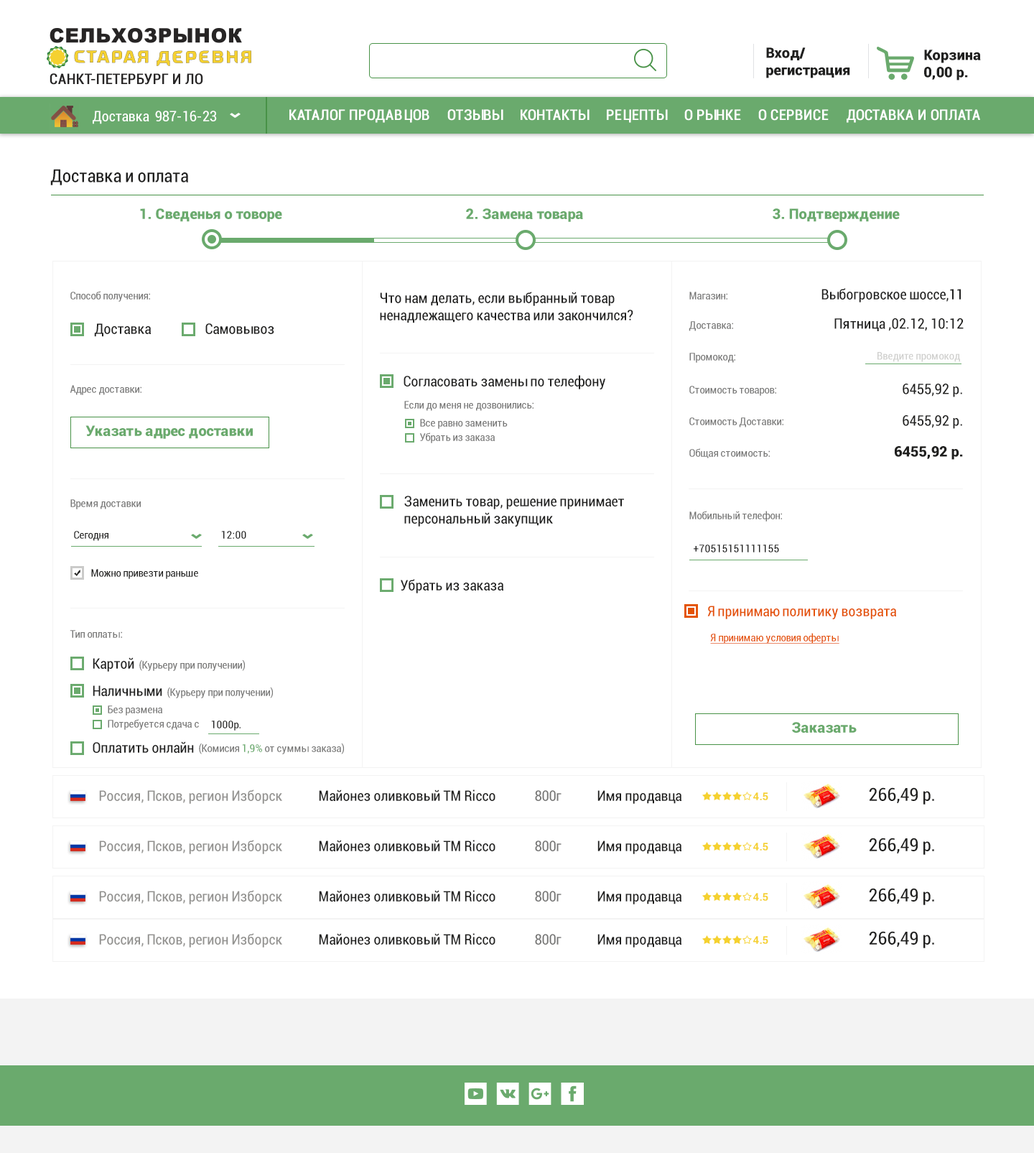
<style>
.page{position:relative;width:1034px;height:1153px;background:#ffffff}
.page>*{position:absolute;margin:0}
.t1{font:14.4px "Roboto-Black";color:#20201f}
.t2{font:14.4px "Roboto-Condensed";color:#272525;text-transform:uppercase;font-weight:bold}
.t3{font:14.4px "Roboto-Condensed";color:#ffffff}
.t4{font:14.4px "Roboto-Condensed";color:#ffffff;text-transform:uppercase;font-weight:bold}
.t5{font:18px "Roboto-Condensed";color:#20201f}
.t6{font:14.4px "Roboto-Black";color:#6aaa6d}
.t7{font:10.8px "Roboto-Condensed";color:#787877}
.t8{font:14.4px "Roboto-Condensed";color:#20201f}
.t9{font:10.8px "Roboto-Condensed";color:#cfcfcd}
.t10{font:10.8px "Roboto-Condensed";color:#20201f}
.t11{font:14.4px "Roboto-Condensed";color:#e45304}
.t12{font:10.8px "Roboto-Condensed";color:#e45304;text-decoration:underline}
.t13{font:10.8px "Roboto-Condensed";color:#6aaa6d}
.t14{font:14.4px "Roboto-Condensed";color:#939290}
.t15{font:14.4px "Roboto-Condensed";color:#787877}
.t16{font:10.8px "Roboto-Bold";color:#f5d130}
</style>
<div class="page">
<p class="t1" style="left:766px;top:47px;width:84px;height:31px">Вход/<br>регистрация</p>
<p class="t1" style="left:924px;top:50px;width:57px;height:30px">Корзина<br>0,00 р.</p>
<p class="t2" style="left:50px;top:73px;width:153px;height:12px">Санкт-Петербург и ЛО</p>
<p class="t3" style="left:93px;top:111px;width:56px;height:13px">Доставка</p>
<p class="t3" style="left:155px;top:111px;width:62px;height:10px">987-16-23</p>
<p class="t4" style="left:289px;top:109px;width:141px;height:14px">Каталог продавцов</p>
<p class="t4" style="left:447px;top:109px;width:57px;height:12px">Отзывы</p>
<p class="t4" style="left:521px;top:109px;width:69px;height:12px">Контакты</p>
<p class="t4" style="left:607px;top:109px;width:61px;height:14px">Рецепты</p>
<p class="t4" style="left:685px;top:109px;width:56px;height:12px">О рынке</p>
<p class="t4" style="left:759px;top:109px;width:70px;height:12px">О Сервисе</p>
<p class="t4" style="left:847px;top:109px;width:133px;height:14px">Доставка и оплата</p>
<p class="t5" style="left:50px;top:169px;width:138px;height:16px">Доставка и оплата</p>
<p class="t6" style="left:140px;top:208px;width:142px;height:14px">1. Сведенья о товоре</p>
<p class="t6" style="left:466px;top:208px;width:117px;height:14px">2. Замена товара</p>
<p class="t6" style="left:773px;top:208px;width:127px;height:14px">3. Подтверждение</p>
<p class="t7" style="left:70px;top:291px;width:80px;height:11px">Способ получения:</p>
<p class="t8" style="left:380px;top:292px;width:254px;height:31px">Что нам делать, если выбранный товар <br>ненадлежащего качества или закончился?</p>
<p class="t7" style="left:690px;top:292px;width:38px;height:8px">Магазин:</p>
<p class="t8" style="left:822px;top:288px;width:139px;height:14px">Выбогровское шоссе,11</p>
<p class="t8" style="left:94px;top:323px;width:57px;height:14px">Доставка</p>
<p class="t8" style="left:205px;top:323px;width:69px;height:11px">Самовывоз</p>
<p class="t7" style="left:689px;top:321px;width:44px;height:10px">Доставка:</p>
<p class="t8" style="left:835px;top:318px;width:129px;height:13px">Пятница ,02.12, 10:12</p>
<p class="t7" style="left:690px;top:353px;width:46px;height:10px">Промокод:</p>
<p class="t9" style="left:878px;top:352px;width:82px;height:10px">Введите промокод</p>
<p class="t8" style="left:404px;top:375px;width:202px;height:14px">Согласовать замены по телефону</p>
<p class="t7" style="left:70px;top:385px;width:72px;height:10px">Адрес доставки:</p>
<p class="t7" style="left:690px;top:386px;width:86px;height:10px">Стоимость товаров:</p>
<p class="t8" style="left:903px;top:384px;width:60px;height:13px">6455,92 р.</p>
<p class="t7" style="left:404px;top:401px;width:130px;height:10px">Если до меня не дозвонились:</p>
<p class="t6" style="left:85px;top:425px;width:168px;height:14px">Указать адрес доставки</p>
<p class="t7" style="left:420px;top:419px;width:88px;height:10px">Все равно заменить</p>
<p class="t7" style="left:690px;top:417px;width:94px;height:10px">Стоимость Доставки:</p>
<p class="t8" style="left:903px;top:415px;width:60px;height:14px">6455,92 р.</p>
<p class="t7" style="left:419px;top:432px;width:76px;height:11px">Убрать из заказа</p>
<p class="t7" style="left:690px;top:448px;width:80px;height:10px">Общая стоимость:</p>
<p class="t1" style="left:895px;top:446px;width:68px;height:14px">6455,92 р.</p>
<p class="t8" style="left:404px;top:496px;width:220px;height:31px">Заменить товар, решение принимает <br>персональный закупщик</p>
<p class="t7" style="left:70px;top:499px;width:71px;height:10px">Время доставки</p>
<p class="t7" style="left:690px;top:511px;width:92px;height:10px">Мобильный телефон:</p>
<p class="t10" style="left:74px;top:531px;width:34px;height:10px">Сегодня</p>
<p class="t10" style="left:221px;top:531px;width:25px;height:8px">12:00</p>
<p class="t10" style="left:694px;top:544px;width:85px;height:8px">+70515151111155</p>
<p class="t10" style="left:91px;top:569px;width:107px;height:10px">Можно привезти раньше</p>
<p class="t8" style="left:401px;top:579px;width:103px;height:14px">Убрать из заказа</p>
<p class="t11" style="left:708px;top:606px;width:188px;height:13px">Я принимаю политику возврата</p>
<p class="t7" style="left:70px;top:630px;width:52px;height:8px">Тип оплаты:</p>
<p class="t12" style="left:710px;top:633px;width:130px;height:11px">Я принимаю условия оферты</p>
<p class="t8" style="left:93px;top:657px;width:41px;height:15px">Картой</p>
<p class="t7" style="left:139px;top:659px;width:106px;height:12px">(Курьеру при получении)</p>
<p class="t8" style="left:93px;top:685px;width:69px;height:11px">Наличными</p>
<p class="t7" style="left:167px;top:687px;width:106px;height:11px">(Курьеру при получении)</p>
<p class="t7" style="left:108px;top:705px;width:54px;height:10px">Без размена</p>
<p class="t7" style="left:108px;top:719px;width:91px;height:11px">Потребуется сдача с</p>
<p class="t10" style="left:211px;top:720px;width:30px;height:10px">1000р.</p>
<p class="t6" style="left:792px;top:722px;width:65px;height:11px">Заказать</p>
<p class="t8" style="left:93px;top:741px;width:101px;height:12px">Оплатить онлайн</p>
<p class="t7" style="left:199px;top:743px;width:145px;height:11px">(Комисия <span class="t13">1,9%</span> от суммы заказа)</p>
<p class="t14" style="left:99px;top:789px;width:183px;height:15px">Россия, Псков, регион Изборск</p>
<p class="t8" style="left:319px;top:789px;width:177px;height:12px">Майонез оливковый ТМ Ricco</p>
<p class="t15" style="left:535px;top:790px;width:27px;height:11px">800г</p>
<p class="t8" style="left:598px;top:790px;width:84px;height:14px">Имя продавца</p>
<p class="t16" style="left:753px;top:792px;width:16px;height:8px">4.5</p>
<p class="t5" style="left:869px;top:787px;width:65px;height:17px">266,49 р.</p>
<p class="t14" style="left:99px;top:840px;width:183px;height:14px">Россия, Псков, регион Изборск</p>
<p class="t8" style="left:319px;top:840px;width:177px;height:11px">Майонез оливковый ТМ Ricco</p>
<p class="t15" style="left:535px;top:840px;width:27px;height:11px">800г</p>
<p class="t8" style="left:598px;top:840px;width:84px;height:14px">Имя продавца</p>
<p class="t16" style="left:753px;top:843px;width:16px;height:7px">4.5</p>
<p class="t5" style="left:869px;top:838px;width:65px;height:17px">266,49 р.</p>
<p class="t14" style="left:99px;top:890px;width:183px;height:14px">Россия, Псков, регион Изборск</p>
<p class="t8" style="left:319px;top:890px;width:177px;height:11px">Майонез оливковый ТМ Ricco</p>
<p class="t15" style="left:535px;top:891px;width:27px;height:10px">800г</p>
<p class="t8" style="left:598px;top:891px;width:84px;height:13px">Имя продавца</p>
<p class="t16" style="left:753px;top:893px;width:16px;height:8px">4.5</p>
<p class="t5" style="left:869px;top:888px;width:65px;height:17px">266,49 р.</p>
<p class="t14" style="left:99px;top:933px;width:183px;height:14px">Россия, Псков, регион Изборск</p>
<p class="t8" style="left:319px;top:933px;width:177px;height:12px">Майонез оливковый ТМ Ricco</p>
<p class="t15" style="left:535px;top:934px;width:27px;height:11px">800г</p>
<p class="t8" style="left:598px;top:934px;width:84px;height:13px">Имя продавца</p>
<p class="t16" style="left:753px;top:936px;width:16px;height:8px">4.5</p>
<p class="t5" style="left:869px;top:931px;width:65px;height:17px">266,49 р.</p>
</div>
